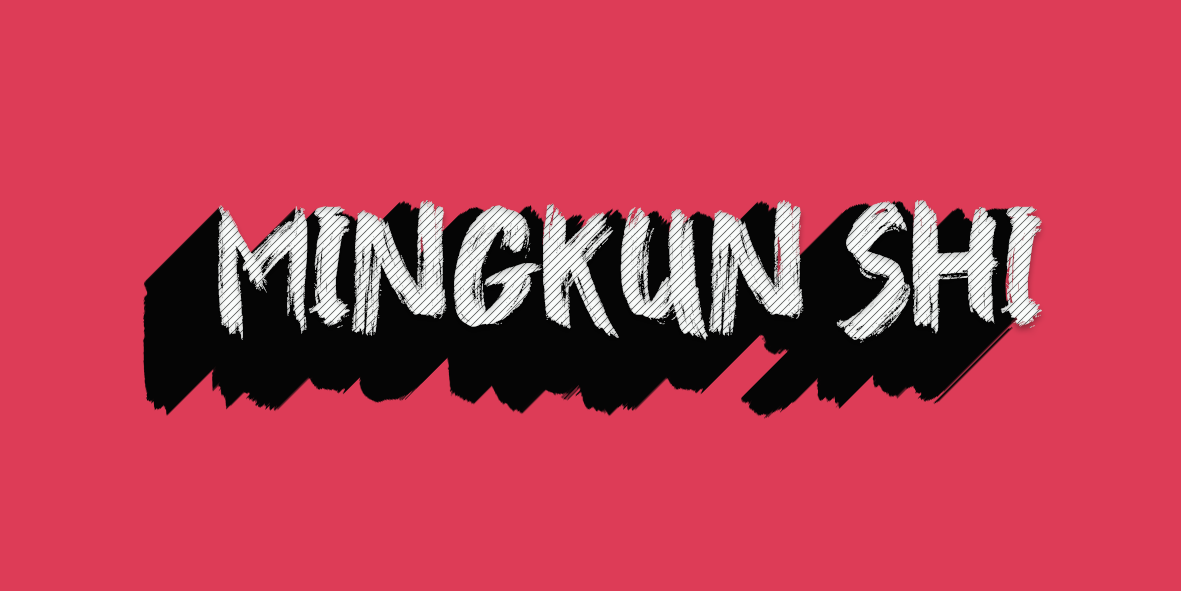
<style>
.page{position:relative;width:1181px;height:591px;background:#dd3c57}
.page>*{position:absolute;margin:0}
.t1{font:75px "HigherJump";color:#eef5f1}
</style>
<div class="page">
<p class="t1" style="left:218px;top:199px;width:824px;height:144px">Mingkun SHI</p>
</div>
